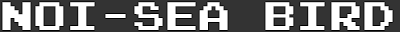
<style>
.page{position:relative;width:400px;height:32px;background:#333333}
.page>*{position:absolute;margin:0}
.t1{font:39.7px "JoystixMonospace-Regular";color:#ffffff}
</style>
<div class="page">
<p class="t1" style="left:2px;top:2px;width:391px;height:28px">NOI-SEA BIRD</p>
</div>
